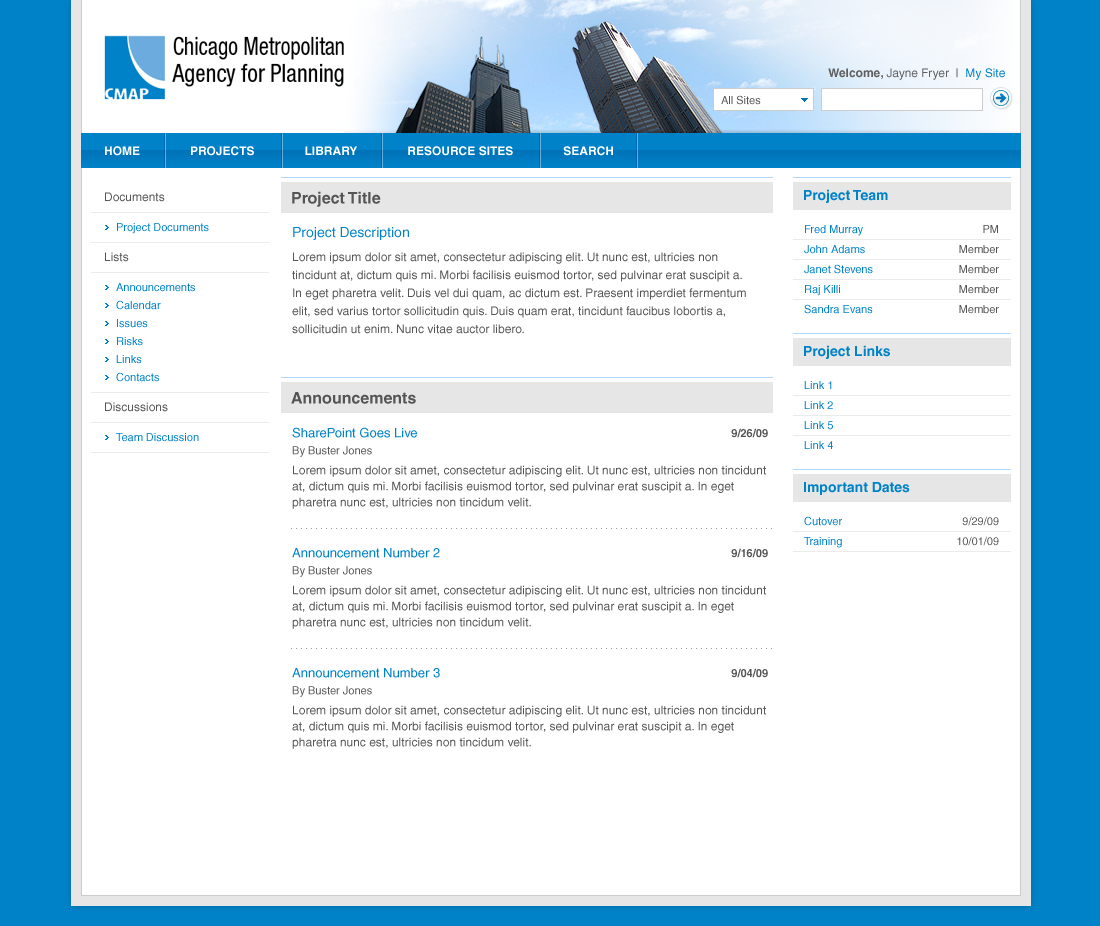
<style>
.page{position:relative;width:1100px;height:926px;background:#ffffff}
.page>*{position:absolute;margin:0}
.t1{font:12px "Helvetica";color:#606060}
.t2{font:12px "Helvetica-Bold";color:#606060}
.t3{font:12px "Helvetica";color:#0082c8}
.t4{font:11px "Helvetica";color:#555555}
.t5{font:12px "Helvetica-Bold";color:#ffffff;text-transform:uppercase}
.t6{font:11px/18px "Helvetica";color:#0082c8}
.t7{font:12px/30px "Helvetica";color:#555555}
.t8{font:11px/30px "Helvetica";color:#0082c8}
.t9{font:16px "Helvetica-Bold";color:#555555}
.t10{font:14px "Helvetica-Bold";color:#0082c8}
.t11{font:12px/18px "Helvetica";color:#555555}
.t12{font:14px/18px "Helvetica";color:#0082c8}
.t13{font:12px/24px "Helvetica";color:#555555}
.t14{font:11px/20px "Helvetica";color:#0082c8}
.t15{font:11px/20px "Helvetica";color:#555555}
.t16{font:12px/16px "Helvetica";color:#555555}
.t17{font:13px/16px "Helvetica";color:#0082c8}
.t18{font:11px/17px "Helvetica";color:#555555}
.t19{font:12px/20px "Helvetica";color:#555555}
.t20{font:11px "Helvetica-Bold";color:#555555}
</style>
<div class="page">
<p class="t1" style="left:828px;top:68px;width:177px;height:12px"><span class="t2">Welcome, </span>Jayne Fryer  |  <span class="t3">My Site</span></p>
<p class="t4" style="left:721px;top:95px;width:40px;height:10px">All Sites</p>
<p class="t5" style="left:105px;top:146px;width:508px;height:10px">Home               Projects               LIBRARY               RESOURCE SITES               SEARCH</p>
<p class="t6" style="left:105px;top:192px;width:104px;height:250px"><span class="t7">Documents<br></span><span class="t8">Project Documents<br></span><span class="t7">Lists<br></span><span class="t8">Announcements<br></span>Calendar<br>Issues<br>Risks<br>Links<br>Contacts<br><span class="t7">Discussions<br></span><span class="t8">Team Discussion</span></p>
<p class="t9" style="left:292px;top:191px;width:89px;height:16px">Project Title</p>
<p class="t10" style="left:804px;top:189px;width:84px;height:14px">Project Team</p>
<p class="t11" style="left:292px;top:227px;width:454px;height:107px"><span class="t12">Project Description<br></span><span class="t13">Lorem</span> ipsum dolor sit amet, consectetur adipiscing elit. Ut nunc est, ultricies non tincidunt at, dictum quis mi. Morbi facilisis euismod tortor, sed pulvinar erat suscipit a. In eget pharetra velit. Duis vel dui quam, ac dictum est. Praesent imperdiet fermentum elit, sed varius tortor sollicitudin quis. Duis quam erat, tincidunt faucibus lobortis a, sollicitudin ut enim. Nunc vitae auctor libero.</p>
<p class="t14" style="left:804px;top:225px;width:69px;height:89px">Fred Murray<br>John Adams<br>Janet Stevens<br>Raj Killi<br>Sandra Evans</p>
<p class="t15" style="left:959px;top:225px;width:40px;height:89px;text-align:right">PM<br>Member<br>Member<br>Member<br>Member</p>
<p class="t10" style="left:804px;top:345px;width:86px;height:14px">Project Links</p>
<p class="t14" style="left:804px;top:381px;width:29px;height:68px">Link 1<br>Link 2<br>Link 5<br>Link 4</p>
<p class="t9" style="left:291px;top:392px;width:125px;height:12px">Announcements</p>
<p class="t16" style="left:292px;top:427px;width:474px;height:82px"><span class="t17">SharePoint Goes Live<br></span><span class="t18">By Buster Jones<br></span><span class="t19">Lorem</span> ipsum dolor sit amet, consectetur adipiscing elit. Ut nunc est, ultricies non tincidunt at, dictum quis mi. Morbi facilisis euismod tortor, sed pulvinar erat suscipit a. In eget pharetra nunc est, ultricies non tincidum velit.</p>
<p class="t20" style="left:731px;top:428px;width:37px;height:10px">9/26/09</p>
<p class="t10" style="left:804px;top:482px;width:106px;height:13px">Important Dates</p>
<p class="t14" style="left:804px;top:516px;width:38px;height:32px">Cutover<br>Training</p>
<p class="t15" style="left:957px;top:516px;width:42px;height:30px;text-align:right">9/29/09<br>10/01/09</p>
<p class="t16" style="left:292px;top:548px;width:474px;height:81px"><span class="t17">Announcement Number 2<br></span><span class="t18">By Buster Jones<br></span><span class="t19">Lorem</span> ipsum dolor sit amet, consectetur adipiscing elit. Ut nunc est, ultricies non tincidunt at, dictum quis mi. Morbi facilisis euismod tortor, sed pulvinar erat suscipit a. In eget pharetra nunc est, ultricies non tincidum velit.</p>
<p class="t20" style="left:731px;top:548px;width:37px;height:10px">9/16/09</p>
<p class="t16" style="left:292px;top:668px;width:474px;height:81px"><span class="t17">Announcement Number 3<br></span><span class="t18">By Buster Jones<br></span><span class="t19">Lorem</span> ipsum dolor sit amet, consectetur adipiscing elit. Ut nunc est, ultricies non tincidunt at, dictum quis mi. Morbi facilisis euismod tortor, sed pulvinar erat suscipit a. In eget pharetra nunc est, ultricies non tincidum velit.</p>
<p class="t20" style="left:731px;top:668px;width:37px;height:10px">9/04/09</p>
</div>
